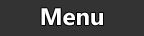
<style>
.page{position:relative;width:144px;height:36px;background:#333333}
.page>*{position:absolute;margin:0}
.t1{font:24px "SegoeUI-Bold";color:#ffffff}
</style>
<div class="page">
<p class="t1" style="left:41px;top:8px;width:62px;height:18px">Menu</p>
</div>
